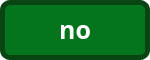
<style>
.page{position:relative;width:150px;height:60px;background:#05751d}
.page>*{position:absolute;margin:0}
.t1{font:25px "OpenSans-Bold";color:#ffffff}
</style>
<div class="page">
<p class="t1" style="left:61px;top:25px;width:29px;height:14px">no</p>
</div>
